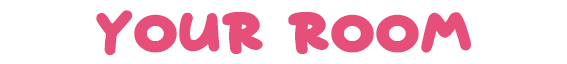
<style>
.page{position:relative;width:567px;height:64px;background:#ffffff}
.page>*{position:absolute;margin:0}
.t1{font:49px "Starborn";color:#e64f7a}
</style>
<div class="page">
<p class="t1" style="left:96px;top:10px;width:375px;height:46px">YOUR ROOM</p>
</div>
